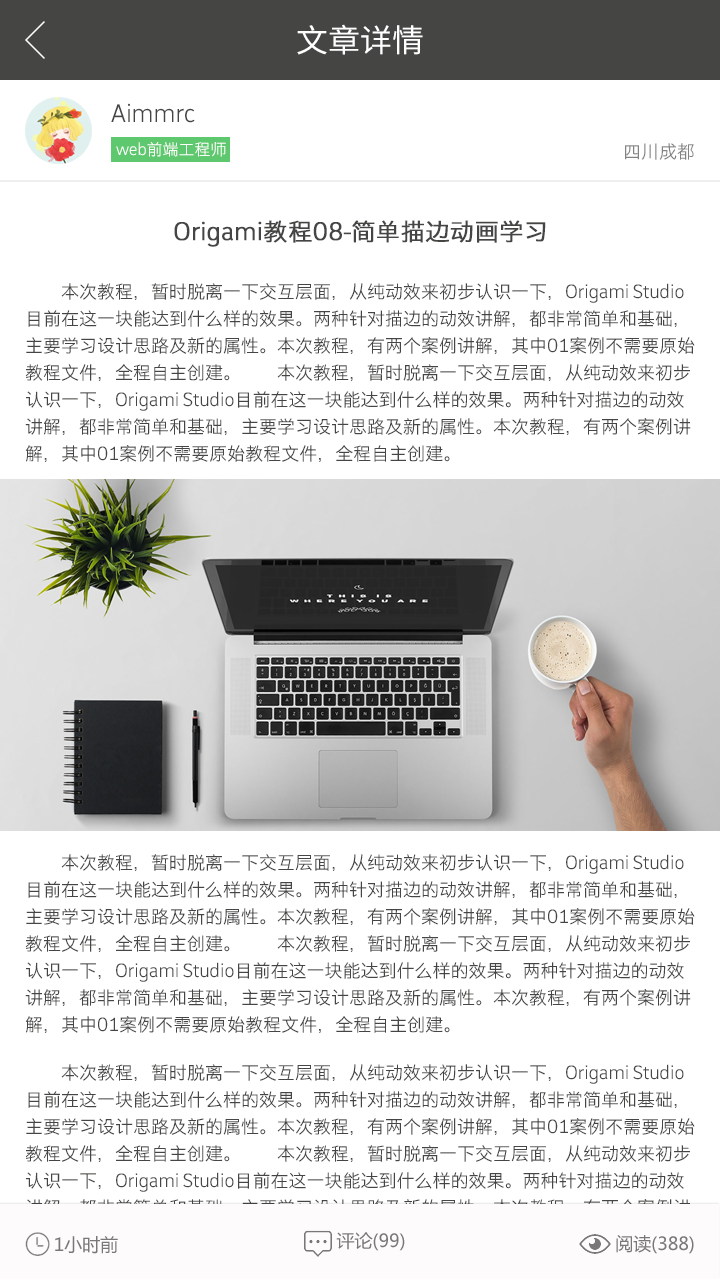
<style>
.page{position:relative;width:720px;height:1280px;background:#ffffff}
.page>*{position:absolute;margin:0}
.t1{font:32px "SourceHanSansCN-Regular";color:#ffffff}
.t2{font:24px "STHeitiSC-Light";color:#454544}
.t3{font:16px "STHeitiSC-Light";color:#ffffff}
.t4{font:18px "STHeitiSC-Light";color:#838282}
.t5{font:24px "STHeitiSC-Light";color:#454544;font-weight:bold}
.t6{font:18px/22px "STHeitiSC-Light";color:#454544}
.t7{font:18px "MicrosoftYaHei";color:#787878}
</style>
<div class="page">
<p class="t1" style="left:297px;top:24px;width:126px;height:31px">文章详情</p>
<p class="t2" style="left:111px;top:103px;width:84px;height:20px">Aimmrc</p>
<p class="t3" style="left:116px;top:142px;width:110px;height:15px">web前端工程师</p>
<p class="t4" style="left:625px;top:143px;width:69px;height:17px">四川成都</p>
<p class="t5" style="left:174px;top:220px;width:372px;height:27px">Origami教程08-简单描边动画学习</p>
<p class="t6" style="left:25px;top:283px;width:670px;height:179px">本次教程，暂时脱离一下交互层面，从纯动效来初步认识一下，Origami Studio<br>目前在这一块能达到什么样的效果。两种针对描边的动效讲解，都非常简单和基础，<br>主要学习设计思路及新的属性。本次教程，有两个案例讲解，其中01案例不需要原始<br>教程文件，全程自主创建。 本次教程，暂时脱离一下交互层面，从纯动效来初步<br>认识一下，Origami Studio目前在这一块能达到什么样的效果。两种针对描边的动效<br>讲解，都非常简单和基础，主要学习设计思路及新的属性。本次教程，有两个案例讲<br>解，其中01案例不需要原始教程文件，全程自主创建。</p>
<p class="t6" style="left:25px;top:854px;width:670px;height:179px">本次教程，暂时脱离一下交互层面，从纯动效来初步认识一下，Origami Studio<br>目前在这一块能达到什么样的效果。两种针对描边的动效讲解，都非常简单和基础，<br>主要学习设计思路及新的属性。本次教程，有两个案例讲解，其中01案例不需要原始<br>教程文件，全程自主创建。 本次教程，暂时脱离一下交互层面，从纯动效来初步<br>认识一下，Origami Studio目前在这一块能达到什么样的效果。两种针对描边的动效<br>讲解，都非常简单和基础，主要学习设计思路及新的属性。本次教程，有两个案例讲<br>解，其中01案例不需要原始教程文件，全程自主创建。</p>
<p class="t6" style="left:25px;top:1064px;width:670px;height:179px">本次教程，暂时脱离一下交互层面，从纯动效来初步认识一下，Origami Studio<br>目前在这一块能达到什么样的效果。两种针对描边的动效讲解，都非常简单和基础，<br>主要学习设计思路及新的属性。本次教程，有两个案例讲解，其中01案例不需要原始<br>教程文件，全程自主创建。 本次教程，暂时脱离一下交互层面，从纯动效来初步<br>认识一下，Origami Studio目前在这一块能达到什么样的效果。两种针对描边的动效<br>讲解，都非常简单和基础，主要学习设计思路及新的属性。本次教程，有两个案例讲<br>解，其中01案例不需要原始教程文件，全程自主创建。</p>
<p class="t7" style="left:55px;top:1236px;width:63px;height:18px">1小时前</p>
<p class="t7" style="left:336px;top:1232px;width:69px;height:19px">评论(99)</p>
<p class="t7" style="left:616px;top:1235px;width:78px;height:19px">阅读(388)</p>
</div>
